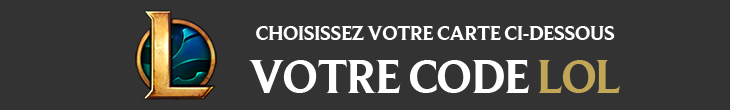
<style>
.page{position:relative;width:730px;height:110px;background:#333333}
.page>*{position:absolute;margin:0}
.t1{font:21px "BeaufortforLOL-Bold";letter-spacing:-0.038em;color:#ffffff}
.t2{font:48px "BeaufortforLOL-Bold";letter-spacing:-0.038em;color:#ffffff}
.t3{font:48px "BeaufortforLOL-Bold";letter-spacing:-0.038em;color:#c2a657}
</style>
<div class="page">
<p class="t1" style="left:256px;top:26px;width:359px;height:14px">CHOISISSEZ VOTRE CARTE CI-DESSOUS</p>
<p class="t2" style="left:249px;top:60px;width:371px;height:33px">VOTRE CODE <span class="t3">LOL</span></p>
</div>
